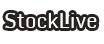
<style>
.page{position:relative;width:104px;height:44px;background:#ffffff}
.page>*{position:absolute;margin:0}
.t1{font:20px "Monda-Regular";color:#ffffff}
</style>
<div class="page">
<p class="t1" style="left:5px;top:13px;width:92px;height:15px">StockLive</p>
</div>
